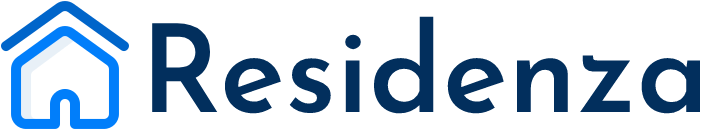
<style>
.page{position:relative;width:706px;height:131px;background:#ffffff}
.page>*{position:absolute;margin:0}
.t1{font:122px "JosefinSans-SemiBold";color:#022f5d}
</style>
<div class="page">
<p class="t1" style="left:152px;top:16px;width:548px;height:98px">Residenza</p>
</div>
